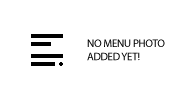
<style>
.page{position:relative;width:180px;height:100px;background:#ffffff}
.page>*{position:absolute;margin:0}
.t1{font:11px "MyriadPro-Regular";letter-spacing:-0.025em;color:#000000}
</style>
<div class="page">
<p class="t1" style="left:87px;top:39px;width:78px;height:22px">NO MENU PHOTO<br>ADDED YET!</p>
</div>
